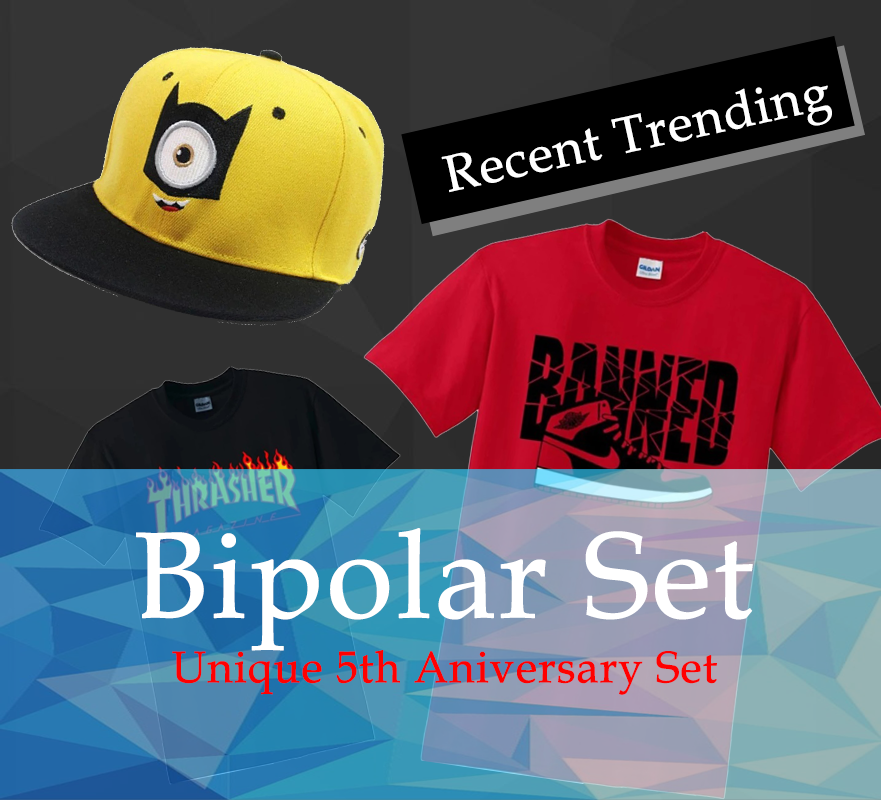
<style>
.page{position:relative;width:881px;height:800px}
.page>*{position:absolute;margin:0}
.t1{font:51px "BookAntiqua";color:#ffffff;font-weight:bold}
.t2{font:122px "BookAntiqua";color:#ffffff;font-weight:bold}
.t3{font:44px "BookAntiqua";color:#ff0000;font-weight:bold}
</style>
<div class="page">
<p class="t1" style="left:441px;top:85px;width:391px;height:108px;rotate:-12deg">Recent Trending</p>
<p class="t2" style="left:136px;top:528px;width:617px;height:123px">Bipolar Set</p>
<p class="t3" style="left:172px;top:650px;width:545px;height:45px">Unique 5th Aniversary Set</p>
</div>
